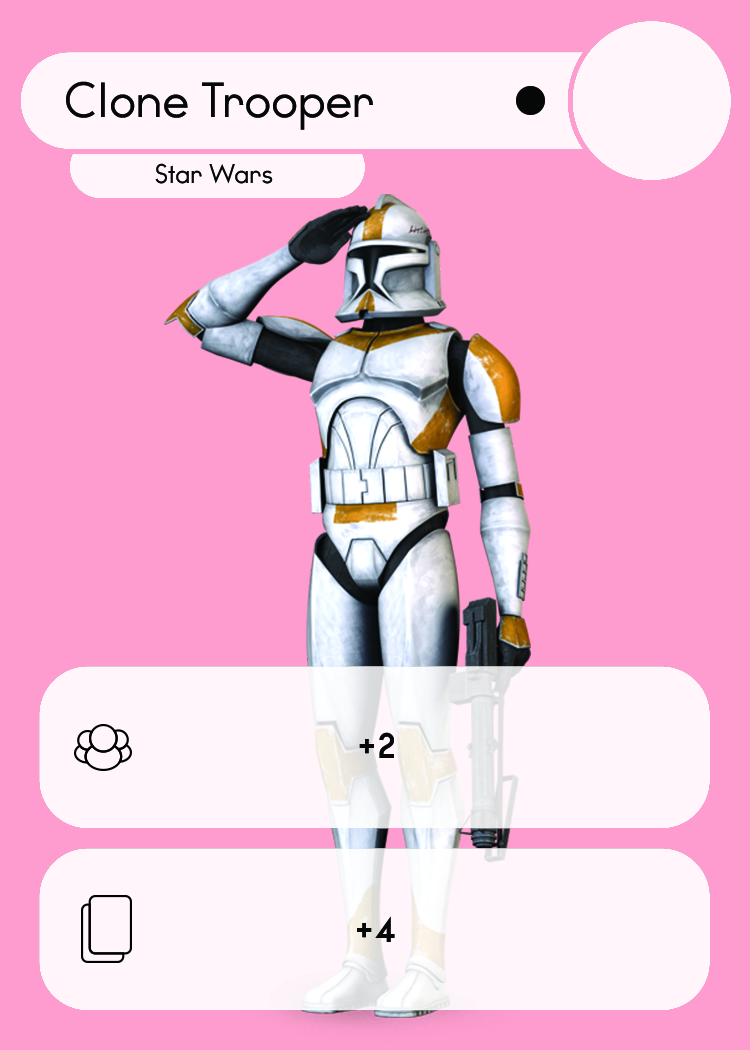
<style>
.page{position:relative;width:750px;height:1050px;background:#ff9ccf}
.page>*{position:absolute;margin:0}
.t1{font:46.7px "WatchwordRegularDemo";color:#060808}
.t2{font:25.5px "WatchwordRegularDemo";color:#060808}
.t3{font:33.3px "WatchwordBoldDemo";color:#060808}
</style>
<div class="page">
<p class="t1" style="left:66px;top:81px;width:307px;height:49px">Clone Trooper</p>
<p class="t2" style="left:155px;top:163px;width:118px;height:21px">Star Wars</p>
<p class="t3" style="left:359px;top:732px;width:35px;height:26px">+2</p>
<p class="t3" style="left:357px;top:916px;width:38px;height:26px">+4</p>
</div>
